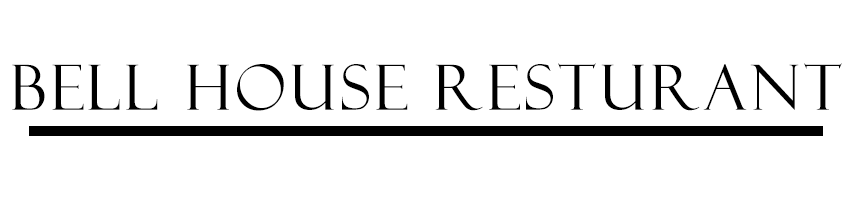
<style>
.page{position:relative;width:854px;height:200px;background:#ffffff}
.page>*{position:absolute;margin:0}
.t1{font:62.5px "FelixTitlingMT";letter-spacing:0.06em;color:#000000}
</style>
<div class="page">
<p class="t1" style="left:12px;top:63px;width:830px;height:48px">Bell House Resturant</p>
</div>
